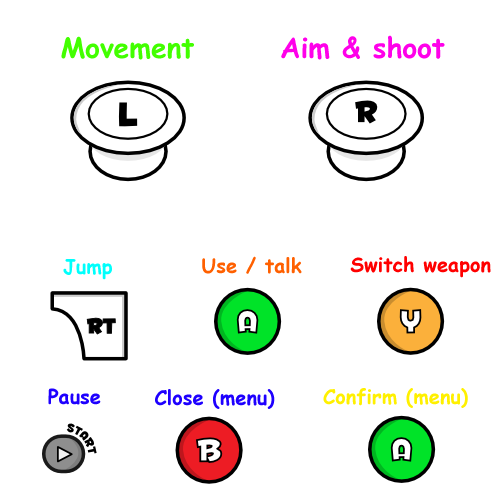
<style>
.page{position:relative;width:500px;height:500px;background:#ffffff}
.page>*{position:absolute;margin:0}
.t1{font:28px "ComicSansMS-Bold";color:#42ff00}
.t2{font:28px "ComicSansMS-Bold";color:#ff00ea}
.t3{font:20px "ComicSansMS-Bold";color:#ff6000}
.t4{font:20px "ComicSansMS-Bold";color:#ff0000}
.t5{font:20px "ComicSansMS-Bold";color:#00fffc}
.t6{font:20px "ComicSansMS-Bold";color:#1e00ff}
.t7{font:20px "ComicSansMS-Bold";color:#fff000}
</style>
<div class="page">
<p class="t1" style="left:61px;top:36px;width:133px;height:24px">Movement</p>
<p class="t2" style="left:281px;top:35px;width:164px;height:25px">Aim &amp; shoot</p>
<p class="t3" style="left:202px;top:256px;width:100px;height:18px">Use / talk</p>
<p class="t4" style="left:350px;top:256px;width:141px;height:22px">Switch weapon</p>
<p class="t5" style="left:63px;top:259px;width:49px;height:21px">Jump</p>
<p class="t6" style="left:48px;top:388px;width:53px;height:17px">Pause</p>
<p class="t6" style="left:155px;top:389px;width:120px;height:20px">Close (menu)</p>
<p class="t7" style="left:323px;top:388px;width:145px;height:20px">Confirm (menu)</p>
</div>
